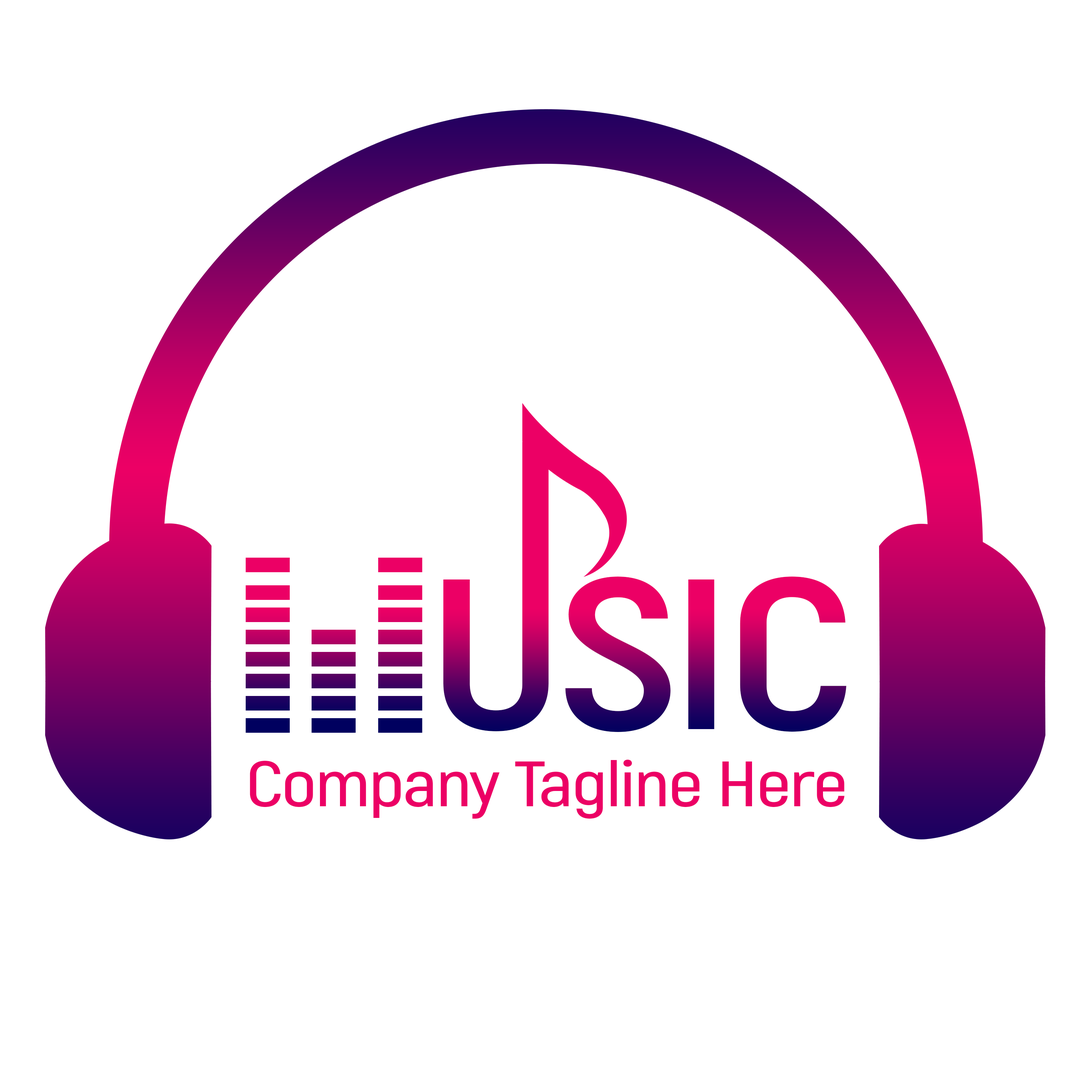
<style>
.page{position:relative;width:1092px;height:1092px;background:#ffffff}
.page>*{position:absolute;margin:0}
.t1{font:213.9px "Akrobat-Bold";letter-spacing:-0.02em;text-transform:uppercase;scale:1.2 1}
.t2{font:63.9px "Akrobat-SemiBold";letter-spacing:-0.02em;color:#ec0065;scale:1.2 1}
</style>
<div class="page">
<p class="t1" style="left:443px;top:577px;width:403px;height:155px">usic</p>
<p class="t2" style="left:250px;top:759px;width:594px;height:60px">Company Tagline Here</p>
</div>
